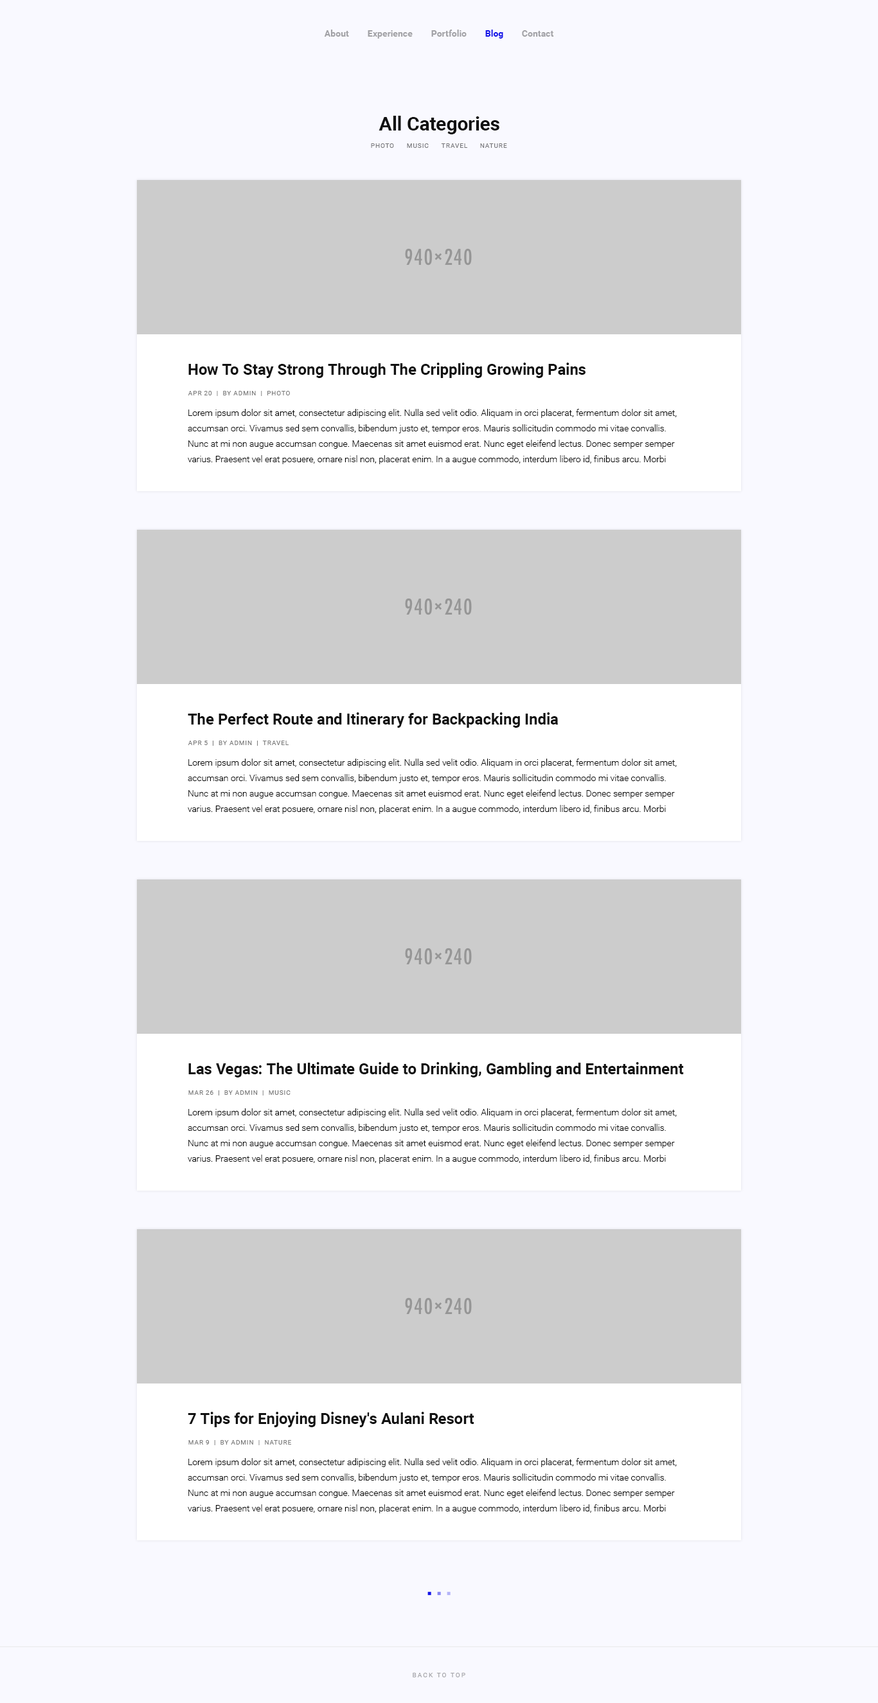
<style>
.page{position:relative;width:878px;height:1703px;background:#f9f9ff}
.page>*{position:absolute;margin:0}
.t1{font:9px "Roboto-Bold";color:#a2a2a6}
.t2{font:9px "Roboto-Bold";color:#1313e8}
.t3{font:19.3px "Roboto-Bold";color:#111111}
.t4{font:6.4px "Roboto-Regular";letter-spacing:0.075em;color:#767679;text-transform:uppercase}
.t5{font:15.4px "Roboto-Bold";color:#111111}
.t6{font:6.4px "Roboto-Regular";letter-spacing:0.075em;color:#797979;text-transform:uppercase}
.t7{font:9px/15.4px "Roboto-Light";color:#000000}
.t8{font:6.4px "Roboto-Regular";letter-spacing:0.2em;color:#a2a2a6;text-transform:uppercase}
</style>
<div class="page">
<p class="t1" style="left:324px;top:30px;width:25px;height:7px">About</p>
<p class="t1" style="left:431px;top:30px;width:36px;height:7px">Portfolio</p>
<p class="t2" style="left:485px;top:30px;width:18px;height:9px">Blog</p>
<p class="t1" style="left:368px;top:30px;width:45px;height:9px">Experience</p>
<p class="t1" style="left:522px;top:30px;width:32px;height:7px">Contact</p>
<p class="t3" style="left:379px;top:116px;width:121px;height:18px">All Categories</p>
<p class="t4" style="left:371px;top:143px;width:23px;height:5px">Photo</p>
<p class="t4" style="left:407px;top:143px;width:22px;height:5px">Music</p>
<p class="t4" style="left:441px;top:143px;width:26px;height:5px">Travel</p>
<p class="t4" style="left:480px;top:143px;width:27px;height:5px">Nature</p>
<p class="t5" style="left:188px;top:363px;width:398px;height:15px">How To Stay Strong Through The Crippling Growing Pains</p>
<p class="t6" style="left:188px;top:391px;width:102px;height:5px">apr 20  |  by admin  |  Photo</p>
<p class="t7" style="left:188px;top:409px;width:489px;height:55px">Lorem ipsum dolor sit amet, consectetur adipiscing elit. Nulla sed velit odio. Aliquam in orci placerat, fermentum dolor sit amet, accumsan orci. Vivamus sed sem convallis, bibendum justo et, tempor eros. Mauris sollicitudin commodo mi vitae convallis. Nunc at mi non augue accumsan congue. Maecenas sit amet euismod erat. Nunc eget eleifend lectus. Donec semper semper varius. Praesent vel erat posuere, ornare nisl non, placerat enim. In a augue commodo, interdum libero id, finibus arcu. Morbi feugiat orci sed turpis sollicitudin, at sodales purus feugiat. Duis blandit pretium diam id pulvinar.</p>
<p class="t5" style="left:188px;top:712px;width:371px;height:16px">The Perfect Route and Itinerary for Backpacking India</p>
<p class="t6" style="left:188px;top:741px;width:101px;height:5px">apr 5  |  by admin  |  travel</p>
<p class="t7" style="left:188px;top:759px;width:489px;height:55px">Lorem ipsum dolor sit amet, consectetur adipiscing elit. Nulla sed velit odio. Aliquam in orci placerat, fermentum dolor sit amet, accumsan orci. Vivamus sed sem convallis, bibendum justo et, tempor eros. Mauris sollicitudin commodo mi vitae convallis. Nunc at mi non augue accumsan congue. Maecenas sit amet euismod erat. Nunc eget eleifend lectus. Donec semper semper varius. Praesent vel erat posuere, ornare nisl non, placerat enim. In a augue commodo, interdum libero id, finibus arcu. Morbi feugiat orci sed turpis sollicitudin, at sodales purus feugiat. Duis blandit pretium diam id pulvinar.</p>
<p class="t5" style="left:188px;top:1062px;width:496px;height:15px">Las Vegas: The Ultimate Guide to Drinking, Gambling and Entertainment</p>
<p class="t6" style="left:188px;top:1090px;width:103px;height:5px">mar 26  |  by admin  |  music</p>
<p class="t7" style="left:188px;top:1108px;width:489px;height:56px">Lorem ipsum dolor sit amet, consectetur adipiscing elit. Nulla sed velit odio. Aliquam in orci placerat, fermentum dolor sit amet, accumsan orci. Vivamus sed sem convallis, bibendum justo et, tempor eros. Mauris sollicitudin commodo mi vitae convallis. Nunc at mi non augue accumsan congue. Maecenas sit amet euismod erat. Nunc eget eleifend lectus. Donec semper semper varius. Praesent vel erat posuere, ornare nisl non, placerat enim. In a augue commodo, interdum libero id, finibus arcu. Morbi feugiat orci sed turpis sollicitudin, at sodales purus feugiat. Duis blandit pretium diam id pulvinar.</p>
<p class="t5" style="left:188px;top:1412px;width:286px;height:15px">7 Tips for Enjoying Disney's Aulani Resort</p>
<p class="t6" style="left:188px;top:1440px;width:103px;height:5px">mar 9  |  by admin  |  nature</p>
<p class="t7" style="left:188px;top:1458px;width:489px;height:55px">Lorem ipsum dolor sit amet, consectetur adipiscing elit. Nulla sed velit odio. Aliquam in orci placerat, fermentum dolor sit amet, accumsan orci. Vivamus sed sem convallis, bibendum justo et, tempor eros. Mauris sollicitudin commodo mi vitae convallis. Nunc at mi non augue accumsan congue. Maecenas sit amet euismod erat. Nunc eget eleifend lectus. Donec semper semper varius. Praesent vel erat posuere, ornare nisl non, placerat enim. In a augue commodo, interdum libero id, finibus arcu. Morbi feugiat orci sed turpis sollicitudin, at sodales purus feugiat. Duis blandit pretium diam id pulvinar.</p>
<p class="t8" style="left:413px;top:1673px;width:52px;height:4px">back to top</p>
</div>
